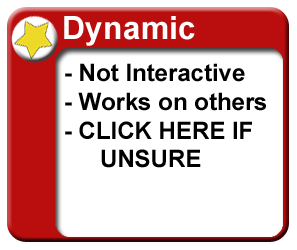
<style>
.page{position:relative;width:297px;height:250px;background:#ffffff}
.page>*{position:absolute;margin:0}
.t1{font:32px "Arial-BoldMT";color:#ffffff}
.t2{font:24px "Arial-BoldMT";color:#000000}
</style>
<div class="page">
<p class="t1" style="left:64px;top:16px;width:131px;height:30px">Dynamic</p>
<p class="t2" style="left:65px;top:63px;width:201px;height:105px">- Not Interactive<br>- Works on others<br>- CLICK HERE IF<br> UNSURE</p>
</div>
